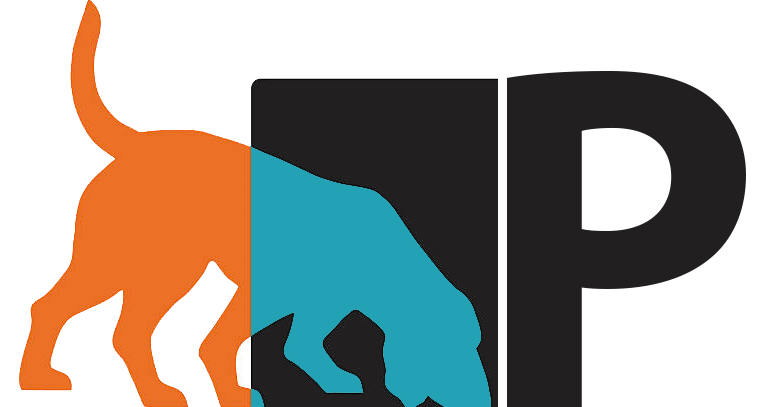
<style>
.page{position:relative;width:762px;height:407px;background:#ffffff}
.page>*{position:absolute;margin:0}
.t1{font:495px "MyriadPro-Bold";color:#211f20}
</style>
<div class="page">
<p class="t1" style="left:507px;top:71px;width:239px;height:336px">P</p>
</div>
